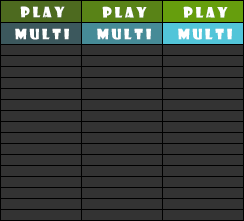
<style>
.page{position:relative;width:244px;height:221px;background:#333333}
.page>*{position:absolute;margin:0}
.t1{font:14px "ShowcardGothic-Reg";color:#ffffff}
</style>
<div class="page">
<p class="t1" style="left:20px;top:6px;width:45px;height:12px">P l a y</p>
<p class="t1" style="left:102px;top:6px;width:45px;height:12px">P l a y</p>
<p class="t1" style="left:183px;top:6px;width:45px;height:12px">P l a y</p>
<p class="t1" style="left:15px;top:28px;width:54px;height:12px">M U L T I</p>
<p class="t1" style="left:97px;top:28px;width:54px;height:12px">M U L T I</p>
<p class="t1" style="left:178px;top:28px;width:54px;height:12px">M U L T I</p>
</div>
